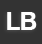
<style>
.page{position:relative;width:42px;height:44px;background:#333333}
.page>*{position:absolute;margin:0}
.t1{font:25px "HelveticaNeue-Bold";letter-spacing:-0.02em;color:#ffffff}
</style>
<div class="page">
<p class="t1" style="left:7px;top:12px;width:30px;height:18px">LB</p>
</div>
